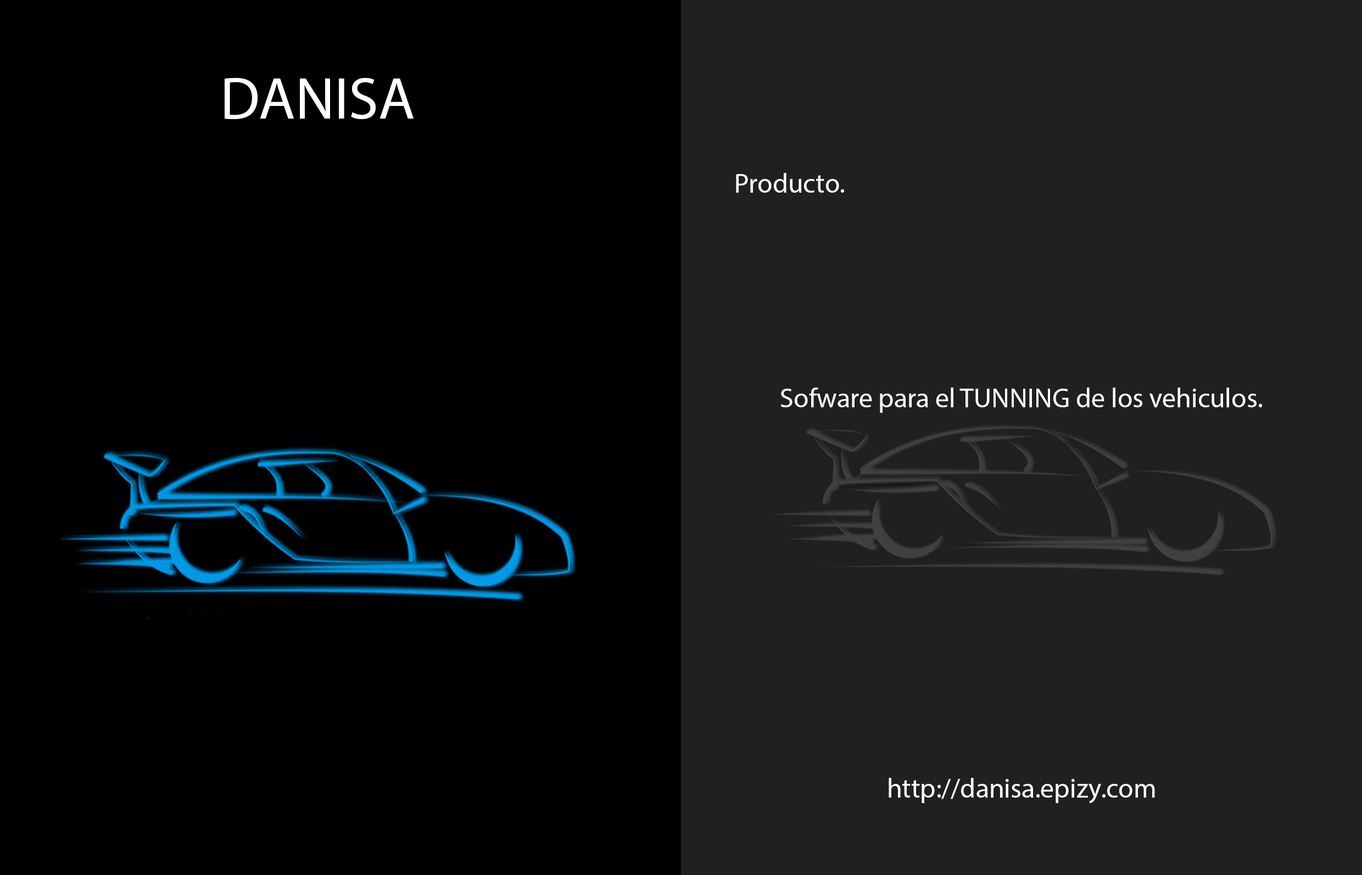
<style>
.page{position:relative;width:1362px;height:875px;background:#202020}
.page>*{position:absolute;margin:0}
.t1{font:59.7px "MyriadPro-Regular";color:#ffffff}
.t2{font:27.5px "MyriadPro-Regular";color:#ffffff}
</style>
<div class="page">
<p class="t1" style="left:225px;top:78px;width:189px;height:41px">DANISA</p>
<p class="t2" style="left:736px;top:173px;width:108px;height:20px">Producto.</p>
<p class="t2" style="left:780px;top:388px;width:482px;height:25px">Sofware para el TUNNING de los vehiculos.</p>
<p class="t2" style="left:889px;top:778px;width:266px;height:26px">http://danisa.epizy.com</p>
</div>
